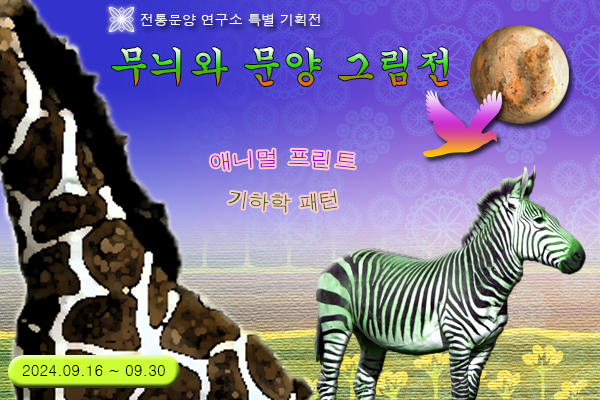
<style>
.page{position:relative;width:600px;height:400px}
.page>*{position:absolute;margin:0}
.t1{font:14px "Dotum";color:#ffffff}
.t2{font:40px "Gungsuh"}
.t3{font:20px "Dotum";color:#9900cc}
.t4{font:20px "Dotum";color:#336600}
.t5{font:15px "Dotum";color:#000000}
</style>
<div class="page">
<p class="t1" style="left:140px;top:13px;width:180px;height:14px">전통문양 연구소 특별 기획전</p>
<p class="t2" style="left:111px;top:47px;width:337px;height:40px">무늬와 문양 그림전</p>
<p class="t3" style="left:210px;top:149px;width:145px;height:22px">애니멀 프린트</p>
<p class="t4" style="left:228px;top:190px;width:110px;height:23px">기하학 패턴</p>
<p class="t5" style="left:22px;top:365px;width:143px;height:11px">2024.09.16 ~ 09.30</p>
</div>
